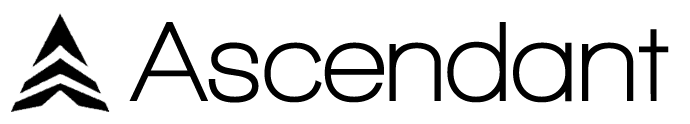
<style>
.page{position:relative;width:690px;height:124px;background:#ffffff}
.page>*{position:absolute;margin:0}
.t1{font:116.4px "WalkwayBold";color:#000000}
</style>
<div class="page">
<p class="t1" style="left:129px;top:22px;width:540px;height:81px">Ascendant</p>
</div>
